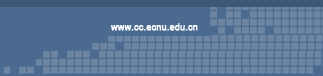
<style>
.page{position:relative;width:323px;height:76px;background:#4b6a8f}
.page>*{position:absolute;margin:0}
.t1{font:9px "ArialMT";color:#fcfdfe;font-weight:bold}
</style>
<div class="page">
<p class="t1" style="left:111px;top:23px;width:87px;height:8px">www.cc.ecnu.edu.cn</p>
</div>
